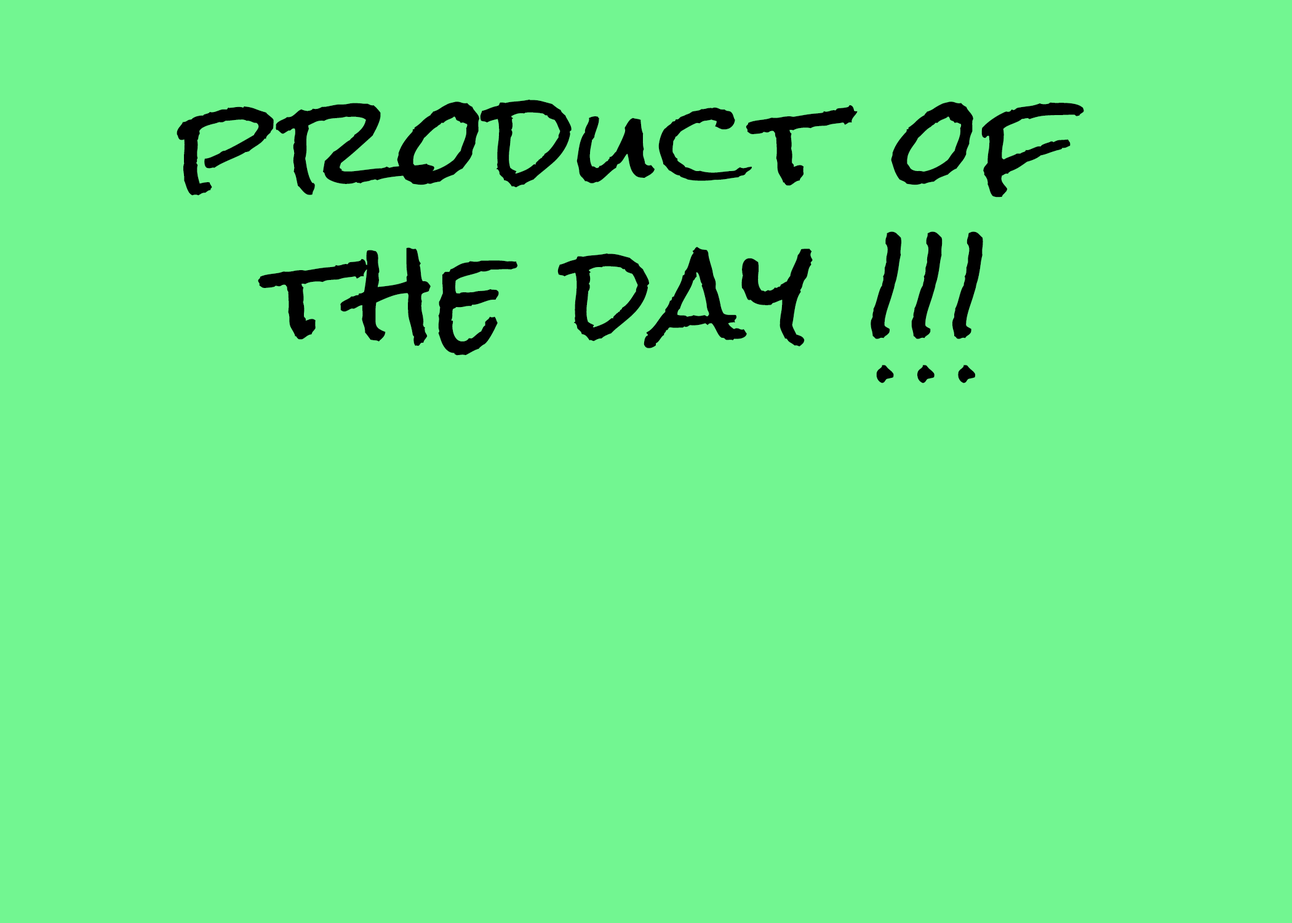
<style>
.page{position:relative;width:1292px;height:923px;background:#72f691}
.page>*{position:absolute;margin:0}
.t1{font:123.1px/153.8px "RockSalt";letter-spacing:0.025em;color:#000000}
</style>
<div class="page">
<p class="t1" style="left:177px;top:100px;width:907px;height:283px;text-align:center">product of the day !!!</p>
</div>
